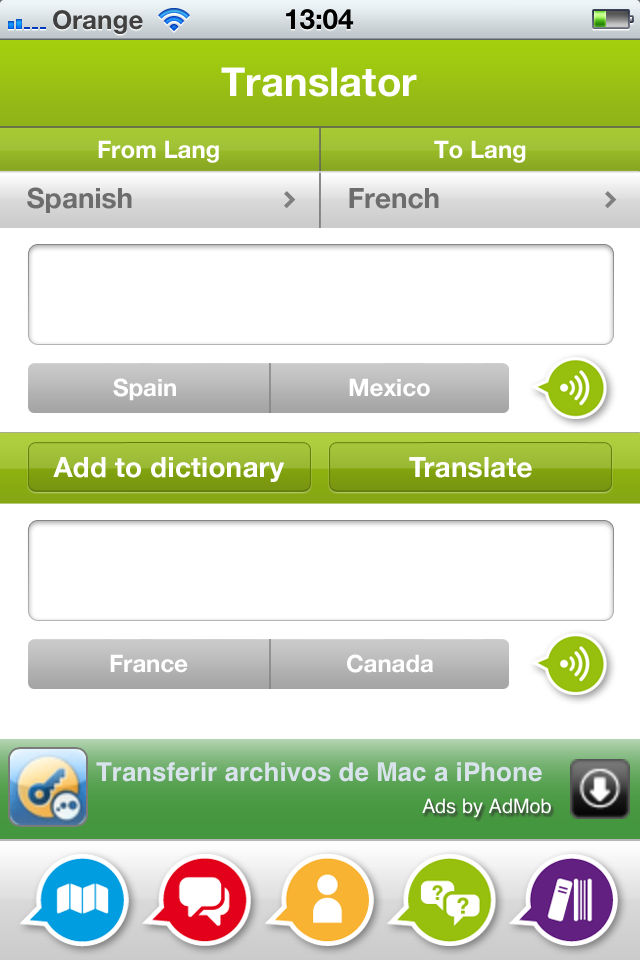
<style>
.page{position:relative;width:640px;height:960px;background:#ffffff}
.page>*{position:absolute;margin:0}
.t1{font:40px "HelveticaNeue-Bold";color:#ffffff}
.t2{font:24px "HelveticaNeue-Bold";color:#ffffff}
.t3{font:28px "HelveticaNeue-Bold";color:#6d6d6d}
.t4{font:28px "HelveticaNeue-Bold";letter-spacing:0.005em;color:#ffffff}
</style>
<div class="page">
<p class="t1" style="left:221px;top:67px;width:196px;height:30px">Translator</p>
<p class="t2" style="left:98px;top:140px;width:121px;height:23px">From Lang</p>
<p class="t2" style="left:434px;top:140px;width:92px;height:23px">To Lang</p>
<p class="t3" style="left:27px;top:187px;width:105px;height:26px">Spanish</p>
<p class="t3" style="left:349px;top:188px;width:90px;height:21px">French</p>
<p class="t2" style="left:113px;top:378px;width:63px;height:23px">Spain</p>
<p class="t2" style="left:349px;top:378px;width:81px;height:19px">Mexico</p>
<p class="t4" style="left:53px;top:457px;width:232px;height:25px">Add to dictionary</p>
<p class="t4" style="left:409px;top:457px;width:123px;height:21px">Translate</p>
<p class="t2" style="left:110px;top:654px;width:78px;height:19px">France</p>
<p class="t2" style="left:347px;top:654px;width:86px;height:19px">Canada</p>
</div>
